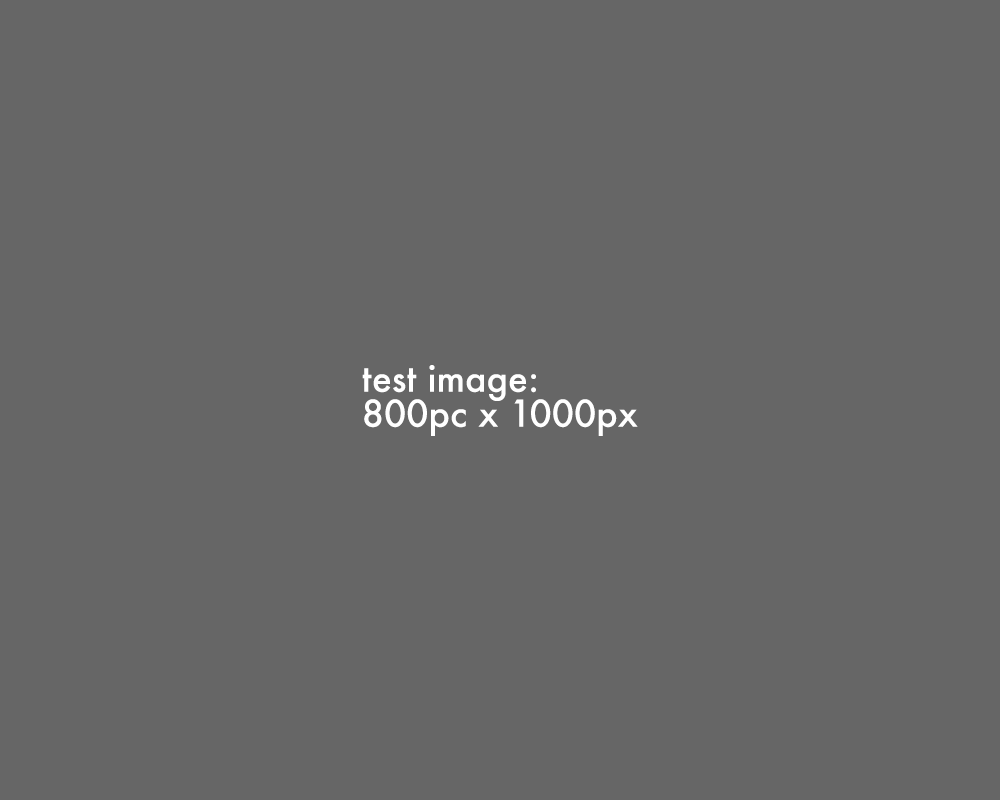
<style>
.page{position:relative;width:1000px;height:800px;background:#666666}
.page>*{position:absolute;margin:0}
.t1{font:36px/35px "Futura-Medium";color:#fffefe}
</style>
<div class="page">
<p class="t1" style="left:362px;top:365px;width:276px;height:71px">test image:<br>800pc x 1000px</p>
</div>
